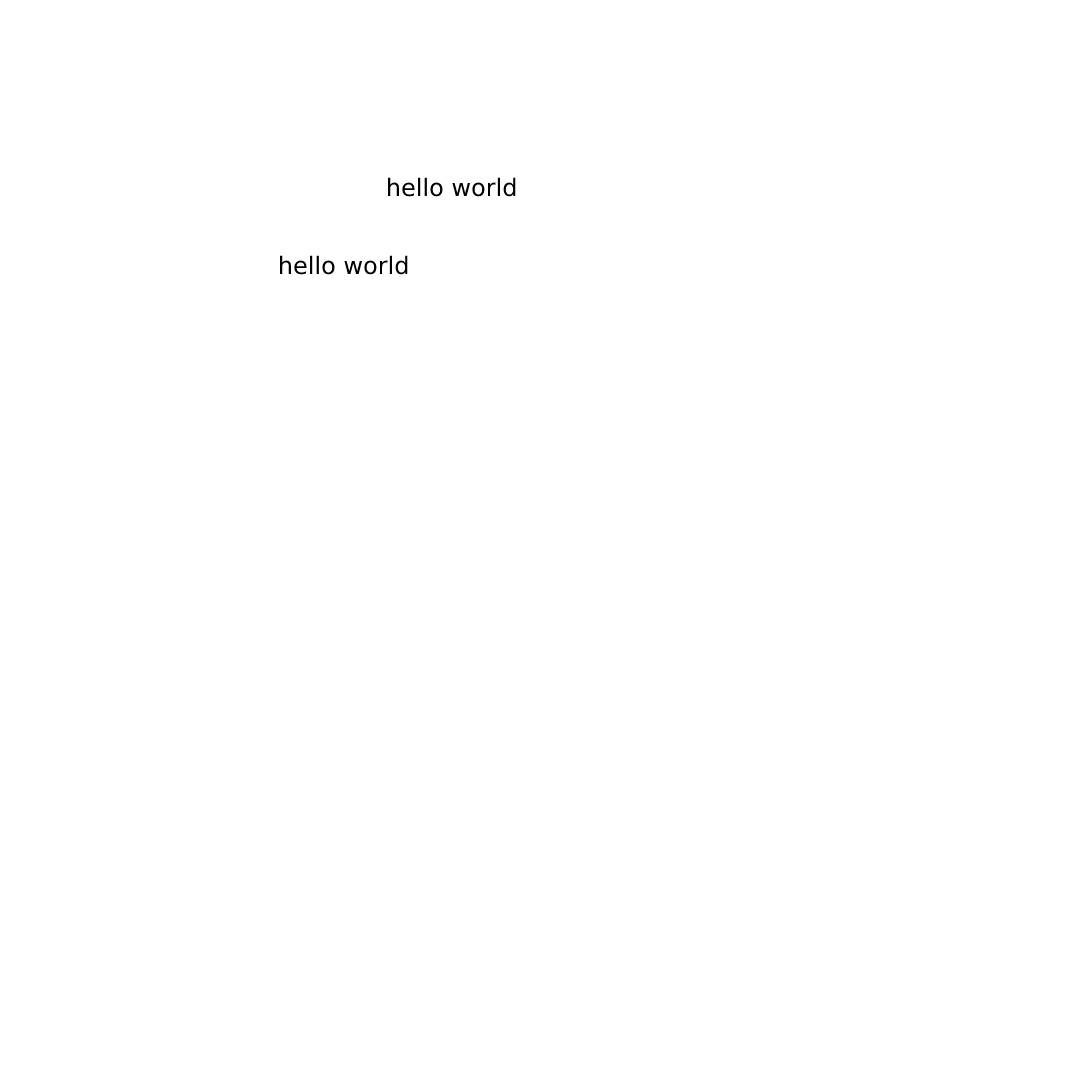
<style>
.page{position:relative;width:1080px;height:1080px;background:#ffffff}
.page>*{position:absolute;margin:0}
.t1{font:24px "DejaVuSans";color:#000000}
</style>
<div class="page">
<p class="t1" style="left:387px;top:177px;width:129px;height:20px">hello world</p>
<p class="t1" style="left:279px;top:255px;width:129px;height:20px">hello world</p>
</div>
